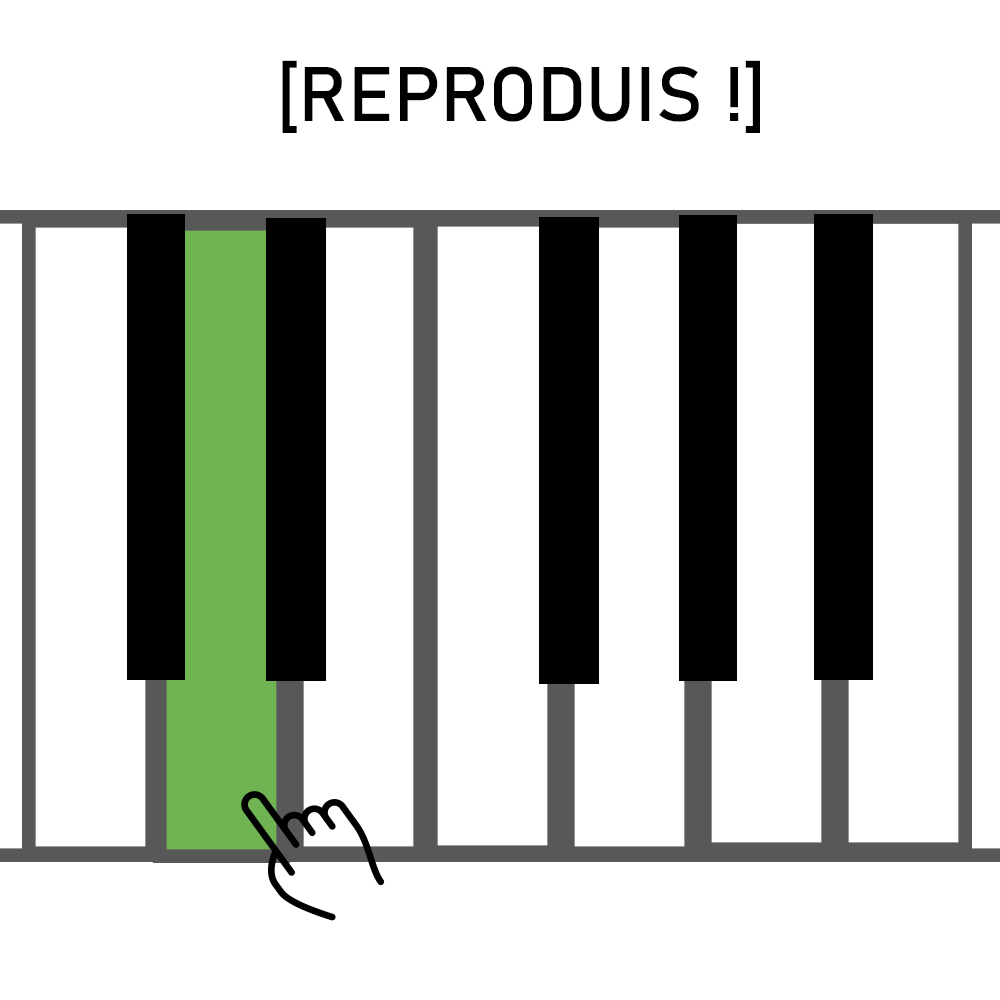
<style>
.page{position:relative;width:1000px;height:1000px;background:#ffffff}
.page>*{position:absolute;margin:0}
.t1{font:129.9px "Bahnschrift";letter-spacing:0.005em;color:#000000}
</style>
<div class="page">
<p class="t1" style="left:282px;top:60px;width:478px;height:73px">[REPRODUIS !]</p>
</div>
